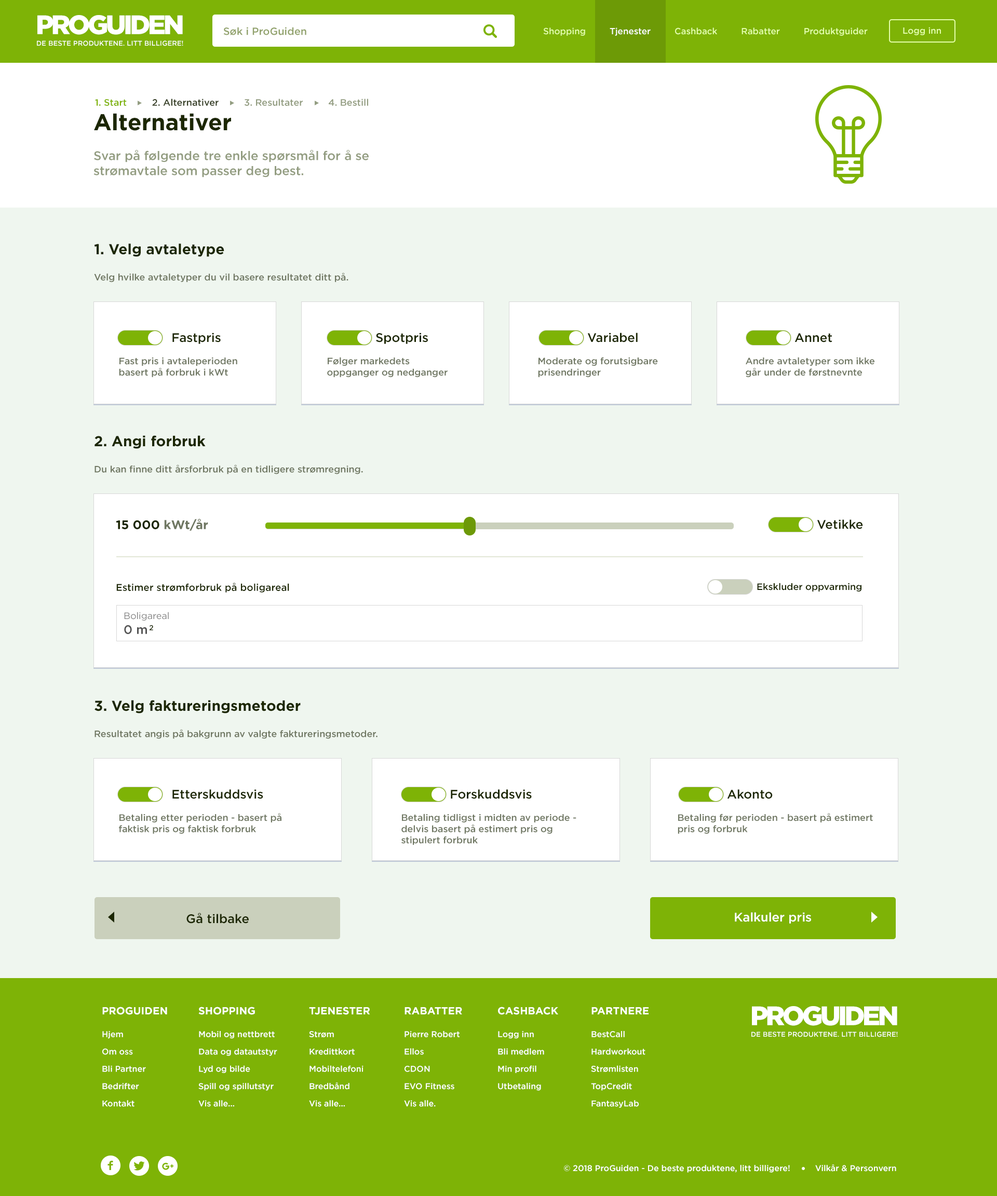
<style>
.page{position:relative;width:997px;height:1196px;background:#eff6ef}
.page>*{position:absolute;margin:0}
.t1{font:6.9px/11.5px "Gotham-Medium";color:#ffffff}
.t2{font:26.6px/44.2px "Gotham-Black";letter-spacing:-0.09em;color:#ffffff}
.t3{font:10.4px "Gotham-Medium";color:#93a36e}
.t4{font:8.8px "Gotham-Medium";color:#e4feaa}
.t5{font:8.8px "Gotham-Medium";color:#ffffff}
.t6{font:9.3px "Gotham-Medium";color:#939d81}
.t7{font:9.3px "Gotham-Medium";color:#7eb306}
.t8{font:9.3px "Gotham-Medium";color:#353e24}
.t9{font:12.5px "Gotham-Medium";color:#939d81}
.t10{font:22.8px "Gotham-Bold";color:#1c2702}
.t11{font:9.3px "Gotham-Medium";color:#6f7762}
.t12{font:14.5px "Gotham-Bold";color:#1c2702}
.t13{font:12.5px "Gotham-Medium";color:#1c2702}
.t14{font:12.5px "Gotham-Bold";color:#1c2702}
.t15{font:12.5px "Gotham-Bold";color:#6f7762}
.t16{font:9.9px "Gotham-Medium";color:#1c2702}
.t17{font:9.3px "Gotham-Medium";color:#1c2702}
.t18{font:9.3px "Gotham-Book";color:#828282}
.t19{font:12.5px "Gotham-Medium";color:#535353}
.t20{font:7.3px "Gotham-Medium";color:#1c2702}
.t21{font:12.5px "Gotham-Medium";color:#ffffff}
.t22{font:8.3px/17.3px "Gotham-Medium";color:#ffffff}
.t23{font:10.4px/5.4px "Gotham-Bold";color:#ffffff}
.t24{font:8.3px "Gotham-Medium";color:#ffffff}
</style>
<div class="page">
<p class="t1" style="left:37px;top:15px;width:146px;height:31px;text-align:center"><span class="t2">PROGUIDEN<br></span>DE BESTE PRODUKTENE. LITT BILLIGERE!</p>
<p class="t3" style="left:223px;top:27px;width:83px;height:8px">Søk i ProGuiden</p>
<p class="t4" style="left:543px;top:28px;width:324px;height:8px">Shopping         <span class="t5">Tjenester</span>         Cashback         Rabatter         Produktguider</p>
<p class="t4" style="left:903px;top:27px;width:38px;height:8px">Logg inn</p>
<p class="t6" style="left:95px;top:99px;width:273px;height:7px"><span class="t7">1. Start </span><span class="t8">        2. Alternativer         </span>3. Resultater         4. Bestill</p>
<p class="t9" style="left:93px;top:113px;width:276px;height:65px"><span class="t10">Alternativer<br></span><br>Svar på følgende tre enkle spørsmål for å se <br>strømavtale som passer deg best.</p>
<p class="t11" style="left:94px;top:243px;width:254px;height:39px"><span class="t12">1. Velg avtaletype<br><br></span>Velg hvilke avtaletyper du vil basere resultatet ditt på.</p>
<p class="t13" style="left:172px;top:333px;width:49px;height:11px">Fastpris</p>
<p class="t13" style="left:376px;top:333px;width:52px;height:11px">Spotpris</p>
<p class="t13" style="left:587px;top:333px;width:50px;height:10px">Variabel</p>
<p class="t13" style="left:794px;top:333px;width:38px;height:10px">Annet</p>
<p class="t11" style="left:119px;top:357px;width:118px;height:20px">Fast pris i avtaleperioden basert på forbruk i kWt</p>
<p class="t11" style="left:327px;top:357px;width:120px;height:20px">Følger markedets oppganger og nedganger</p>
<p class="t11" style="left:538px;top:357px;width:120px;height:20px">Moderate og forutsigbare prisendringer</p>
<p class="t11" style="left:745px;top:357px;width:129px;height:20px">Andre avtaletyper som ikke går under de førstnevnte</p>
<p class="t11" style="left:94px;top:436px;width:269px;height:38px"><span class="t12">2. Angi forbruk<br><br></span>Du kan finne ditt årsforbruk på en tidligere strømregning.</p>
<p class="t14" style="left:116px;top:519px;width:92px;height:12px">15 000 <span class="t15">kWt/år</span></p>
<p class="t13" style="left:817px;top:520px;width:46px;height:9px">Vetikke</p>
<p class="t16" style="left:116px;top:583px;width:173px;height:10px">Estimer strømforbruk på boligareal</p>
<p class="t17" style="left:757px;top:583px;width:104px;height:9px">Ekskluder oppvarming</p>
<p class="t18" style="left:124px;top:612px;width:45px;height:22px">Boligareal<br><span class="t19">0 m</span></p>
<p class="t20" style="left:149px;top:625px;width:4px;height:6px">2</p>
<p class="t11" style="left:94px;top:700px;width:283px;height:39px"><span class="t12">3. Velg faktureringsmetoder<br><br></span>Resultatet angis på bakgrunn av valgte faktureringsmetoder.</p>
<p class="t13" style="left:172px;top:790px;width:91px;height:9px">Etterskuddsvis</p>
<p class="t13" style="left:451px;top:790px;width:81px;height:9px">Forskuddsvis</p>
<p class="t13" style="left:727px;top:790px;width:45px;height:9px">Akonto</p>
<p class="t11" style="left:119px;top:813px;width:162px;height:21px">Betaling etter perioden - basert på faktisk pris og faktisk forbruk</p>
<p class="t11" style="left:401px;top:814px;width:175px;height:32px">Betaling tidligst i midten av periode - delvis basert på estimert pris og stipulert forbruk</p>
<p class="t11" style="left:677px;top:813px;width:196px;height:21px">Betaling før perioden - basert på estimert pris og forbruk</p>
<p class="t13" style="left:186px;top:913px;width:63px;height:11px">Gå tilbake</p>
<p class="t21" style="left:734px;top:913px;width:77px;height:11px">Kalkuler pris</p>
<p class="t22" style="left:102px;top:1007px;width:65px;height:100px"><span class="t23">PROGUIDEN<br><br></span>Hjem<br>Om oss<br>Bli Partner<br>Bedrifter<br>Kontakt</p>
<p class="t22" style="left:198px;top:1007px;width:79px;height:100px"><span class="t23">SHOPPING<br><br></span>Mobil og nettbrett<br>Data og datautstyr<br>Lyd og bilde<br>Spill og spillutstyr<br>Vis alle...</p>
<p class="t22" style="left:309px;top:1007px;width:61px;height:100px"><span class="t23">TJENESTER<br><br></span>Strøm<br>Kredittkort<br>Mobiltelefoni<br>Bredbånd <br>Vis alle...</p>
<p class="t22" style="left:404px;top:1008px;width:58px;height:99px"><span class="t23">RABATTER<br><br></span>Pierre Robert<br>Ellos<br>CDON<br>EVO Fitness<br>Vis alle.</p>
<p class="t22" style="left:498px;top:1007px;width:60px;height:84px"><span class="t23">CASHBACK <br><br></span>Logg inn<br>Bli medlem<br>Min profil<br>Utbetaling</p>
<p class="t22" style="left:591px;top:1008px;width:57px;height:100px"><span class="t23">PARTNERE<br><br></span>BestCall<br>Hardworkout<br>Strømlisten<br>TopCredit<br>FantasyLab</p>
<p class="t1" style="left:751px;top:1006px;width:146px;height:32px;text-align:center"><span class="t2">PROGUIDEN<br></span>DE BESTE PRODUKTENE. LITT BILLIGERE!</p>
<p class="t24" style="left:564px;top:1165px;width:332px;height:8px">© 2018 ProGuiden - De beste produktene, litt billigere!          Vilkår &amp; Personvern</p>
</div>
